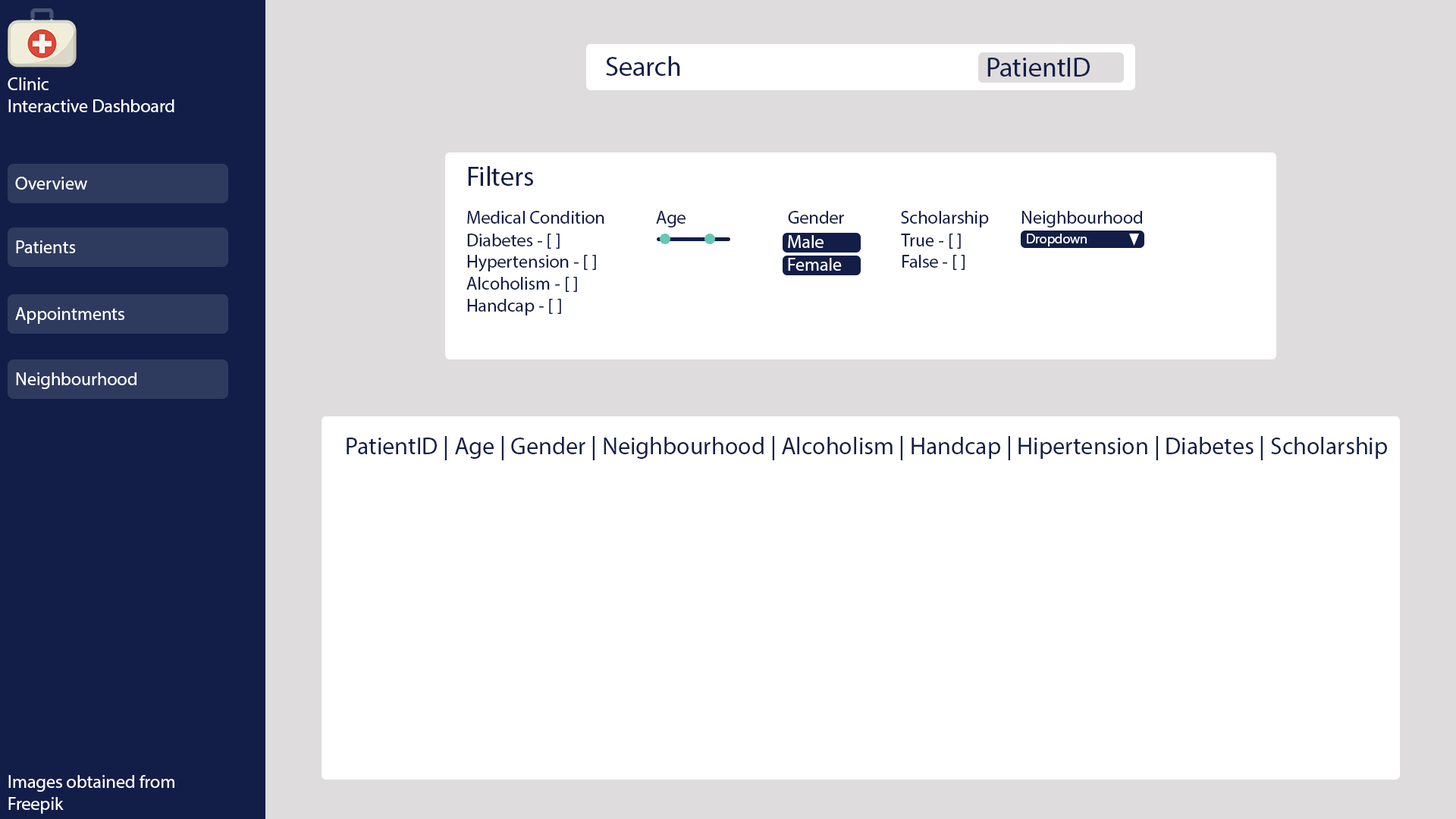
<style>
.page{position:relative;width:1456px;height:819px;background:#ffffff}
.page>*{position:absolute;margin:0}
.t1{font:27.3px "MyriadPro-Regular";color:#121e48}
.t2{font:18.2px "MyriadPro-Regular";color:#ffffff}
.t3{font:18.2px "MyriadPro-Regular";color:#121e48}
.t4{font:13.6px "MyriadPro-Regular";color:#ffffff}
.t5{font:24.3px "MyriadPro-Regular";color:#121e48}
</style>
<div class="page">
<p class="t1" style="left:606px;top:56px;width:74px;height:20px">Search</p>
<p class="t1" style="left:987px;top:58px;width:103px;height:19px">PatientID</p>
<p class="t2" style="left:8px;top:77px;width:166px;height:35px">Clinic<br>Interactive Dashboard</p>
<p class="t1" style="left:468px;top:166px;width:65px;height:20px">Filters</p>
<p class="t2" style="left:15px;top:177px;width:72px;height:13px">Overview</p>
<p class="t3" style="left:467px;top:211px;width:137px;height:13px">Medical Condition</p>
<p class="t3" style="left:656px;top:211px;width:30px;height:16px">Age</p>
<p class="t3" style="left:788px;top:211px;width:56px;height:13px">Gender</p>
<p class="t3" style="left:901px;top:211px;width:88px;height:16px">Scholarship</p>
<p class="t3" style="left:1021px;top:211px;width:121px;height:16px">Neighbourhood</p>
<p class="t3" style="left:466px;top:234px;width:130px;height:81px">Diabetes - [ ]<br>Hypertension - [ ]<br>Alcoholism - [ ]<br>Handcap - [ ]</p>
<p class="t3" style="left:901px;top:234px;width:64px;height:36px">True - [ ]<br>False - [ ]</p>
<p class="t4" style="left:1027px;top:234px;width:60px;height:12px">Dropdown</p>
<p class="t2" style="left:16px;top:240px;width:60px;height:13px">Patients</p>
<p class="t2" style="left:788px;top:235px;width:36px;height:13px">Male</p>
<p class="t2" style="left:788px;top:258px;width:54px;height:13px">Female</p>
<p class="t2" style="left:15px;top:307px;width:109px;height:17px">Appointments</p>
<p class="t2" style="left:16px;top:372px;width:120px;height:17px">Neighbourhood</p>
<p class="t5" style="left:347px;top:436px;width:1040px;height:24px">PatientID | Age | Gender | Neighbourhood | Alcoholism | Handcap | Hipertension | Diabetes | Scholarship</p>
<p class="t2" style="left:8px;top:775px;width:166px;height:39px">Images obtained from<br>Freepik</p>
</div>
